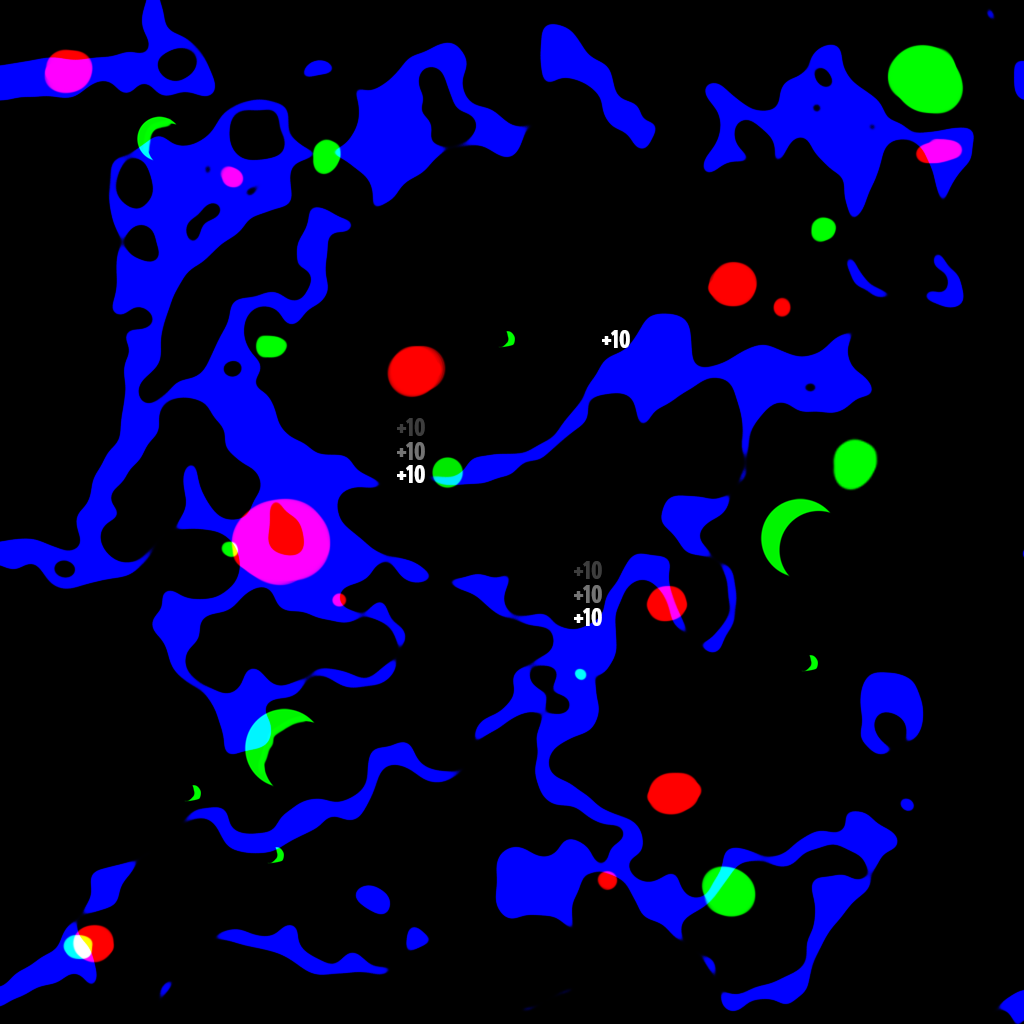
<style>
.page{position:relative;width:1024px;height:1024px;background:#000000}
.page>*{position:absolute;margin:0}
.t1{font:24px "YangoHeadline-Black";letter-spacing:0.04em;color:#ffffff}
.t2{font:24px "YangoHeadline-Black";letter-spacing:0.04em;color:#3d3d3d}
.t3{font:24px "YangoHeadline-Black";letter-spacing:0.04em;color:#747474}
</style>
<div class="page">
<p class="t1" style="left:602px;top:330px;width:28px;height:18px">+10</p>
<p class="t2" style="left:397px;top:418px;width:28px;height:18px">+10</p>
<p class="t3" style="left:397px;top:442px;width:28px;height:18px">+10</p>
<p class="t1" style="left:397px;top:465px;width:28px;height:18px">+10</p>
<p class="t2" style="left:574px;top:561px;width:28px;height:18px">+10</p>
<p class="t3" style="left:574px;top:585px;width:28px;height:18px">+10</p>
<p class="t1" style="left:574px;top:608px;width:28px;height:18px">+10</p>
</div>
